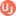
<style>
.page{position:relative;width:16px;height:16px;background:#f7694c}
.page>*{position:absolute;margin:0}
.t1{font:10px "NotoSansCJKkr-Black";color:#e7e6e6;text-transform:uppercase}
</style>
<div class="page">
<p class="t1" style="left:2px;top:3px;width:7px;height:9px">U</p>
<p class="t1" style="left:7px;top:6px;width:6px;height:9px">J</p>
</div>
